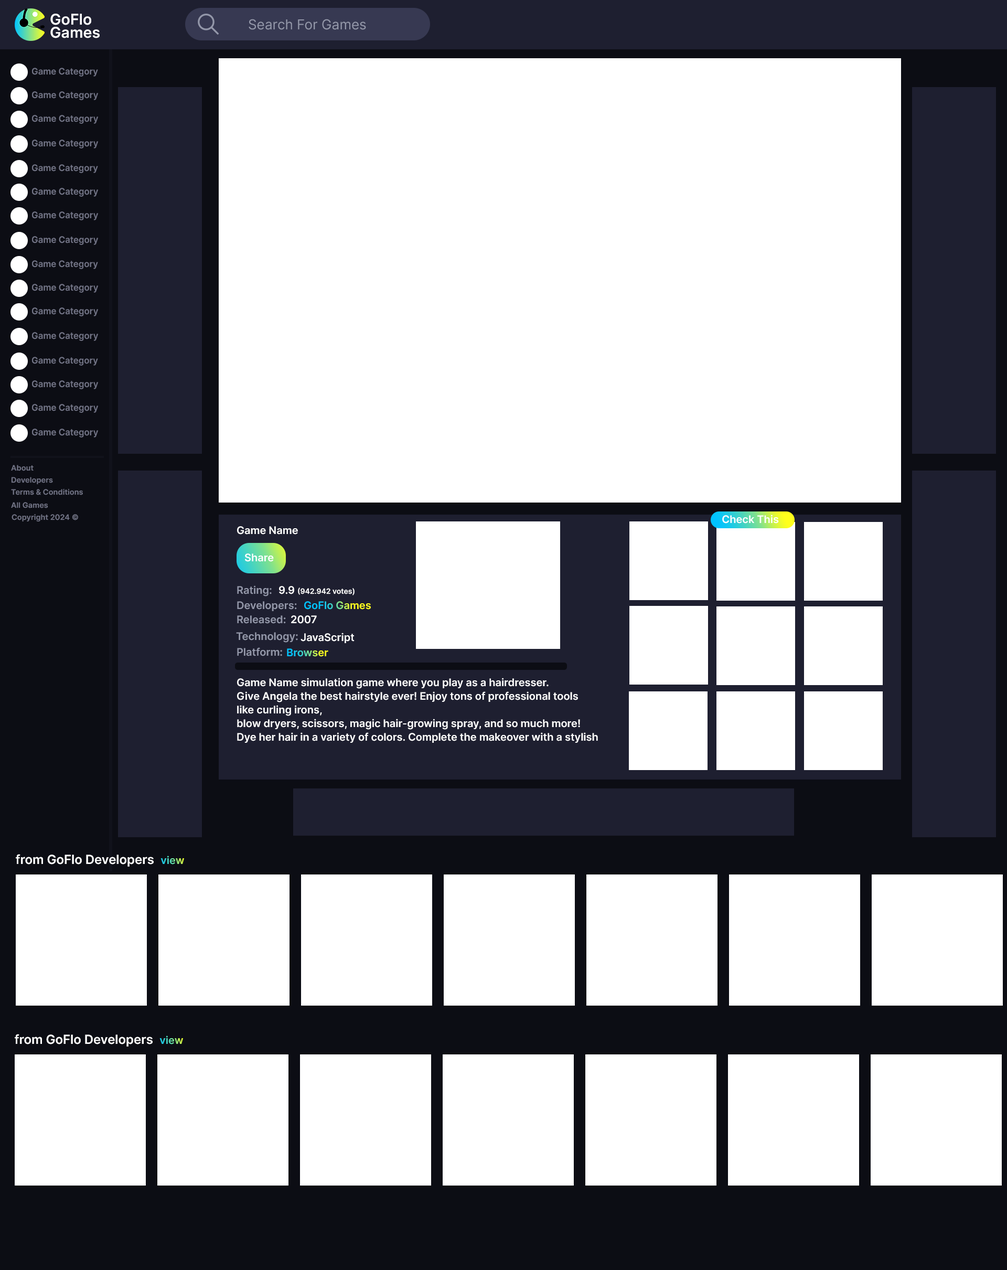
<style>
.page{position:relative;width:1007px;height:1270px;background:#ffffff}
.page>*{position:absolute;margin:0}
.t1{font:15px/13.2px "Inter-SemiBold";color:#fefeff}
.t2{font:13.7px "Inter-Regular";color:#9397a9}
.t3{font:8.9px "Inter-SemiBold";color:#727486}
.t4{font:9px "Inter-SemiBold";color:#727486}
.t5{font:7.5px "Inter-SemiBold";color:#727486}
.t6{font:10.5px "Inter-SemiBold";color:#ffffff}
.t7{font:10.5px "Inter-SemiBold";color:#9397a9}
.t8{font:7.3px "Inter-SemiBold";color:#ffffff}
.t9{font:10.5px "Inter-SemiBold"}
.t10{font:10.5px/13.6px "Inter-SemiBold";color:#ffffff}
.t11{font:12.6px "Inter-SemiBold";color:#ffffff}
</style>
<div class="page">
<p class="t1" style="left:50px;top:14px;width:50px;height:24px">GoFlo<br>Games</p>
<p class="t2" style="left:249px;top:19px;width:117px;height:11px">Search For Games</p>
<p class="t3" style="left:32px;top:68px;width:66px;height:9px">Game Category</p>
<p class="t4" style="left:32px;top:91px;width:66px;height:9px">Game Category</p>
<p class="t4" style="left:32px;top:115px;width:66px;height:9px">Game Category</p>
<p class="t4" style="left:32px;top:139px;width:66px;height:9px">Game Category</p>
<p class="t3" style="left:32px;top:164px;width:66px;height:9px">Game Category</p>
<p class="t4" style="left:32px;top:188px;width:66px;height:9px">Game Category</p>
<p class="t4" style="left:32px;top:211px;width:66px;height:9px">Game Category</p>
<p class="t4" style="left:32px;top:236px;width:66px;height:9px">Game Category</p>
<p class="t3" style="left:32px;top:260px;width:66px;height:9px">Game Category</p>
<p class="t4" style="left:32px;top:284px;width:66px;height:9px">Game Category</p>
<p class="t4" style="left:32px;top:307px;width:66px;height:9px">Game Category</p>
<p class="t4" style="left:32px;top:332px;width:66px;height:9px">Game Category</p>
<p class="t3" style="left:32px;top:357px;width:66px;height:8px">Game Category</p>
<p class="t4" style="left:32px;top:380px;width:66px;height:9px">Game Category</p>
<p class="t4" style="left:32px;top:404px;width:66px;height:9px">Game Category</p>
<p class="t4" style="left:32px;top:428px;width:66px;height:9px">Game Category</p>
<p class="t5" style="left:11px;top:465px;width:23px;height:6px">About</p>
<p class="t5" style="left:11px;top:477px;width:42px;height:8px">Developers</p>
<p class="t5" style="left:11px;top:489px;width:72px;height:6px">Terms &amp; Conditions</p>
<p class="t5" style="left:11px;top:502px;width:37px;height:6px">All Games</p>
<p class="t5" style="left:12px;top:514px;width:66px;height:8px">Copyright 2024 ©</p>
<p class="t6" style="left:722px;top:514px;width:57px;height:9px">Check This</p>
<p class="t6" style="left:237px;top:526px;width:61px;height:8px">Game Name</p>
<p class="t6" style="left:245px;top:553px;width:29px;height:9px">Share</p>
<p class="t7" style="left:237px;top:585px;width:35px;height:11px">Rating:</p>
<p class="t8" style="left:279px;top:586px;width:75px;height:9px"><span class="t6">9.9 </span>(942.942 votes)</p>
<p class="t7" style="left:237px;top:601px;width:60px;height:10px">Developers:</p>
<p class="t9" style="left:304px;top:601px;width:67px;height:8px">GoFlo Games</p>
<p class="t7" style="left:237px;top:615px;width:49px;height:8px">Released:</p>
<p class="t6" style="left:291px;top:615px;width:26px;height:8px">2007</p>
<p class="t7" style="left:236px;top:632px;width:62px;height:10px">Technology:</p>
<p class="t6" style="left:300px;top:632px;width:54px;height:11px">JavaScript</p>
<p class="t7" style="left:237px;top:647px;width:45px;height:9px">Platform:</p>
<p class="t9" style="left:287px;top:648px;width:41px;height:9px">Browser</p>
<p class="t10" style="left:237px;top:678px;width:361px;height:65px">Game Name simulation game where you play as a hairdresser. <br>Give Angela the best hairstyle ever! Enjoy tons of professional tools <br>like curling irons, <br>blow dryers, scissors, magic hair-growing spray, and so much more! <br>Dye her hair in a variety of colors. Complete the makeover with a stylish</p>
<p class="t11" style="left:16px;top:854px;width:138px;height:12px">from GoFlo Developers</p>
<p class="t9" style="left:160px;top:855px;width:24px;height:9px">view</p>
<p class="t11" style="left:15px;top:1034px;width:138px;height:12px">from GoFlo Developers</p>
<p class="t9" style="left:159px;top:1035px;width:24px;height:9px">view</p>
</div>
